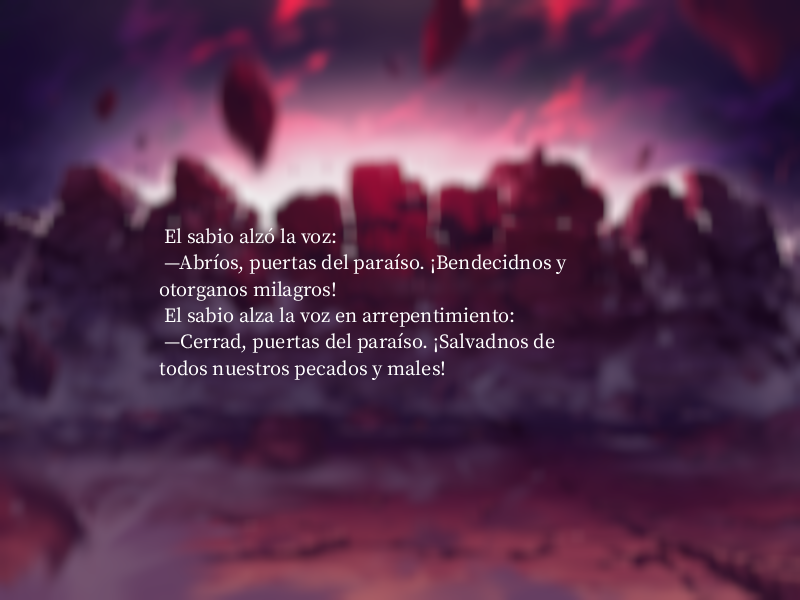
<style>
.page{position:relative;width:800px;height:600px}
.page>*{position:absolute;margin:0}
.t1{font:22px "OfficialFateFont-Medium";color:#ffffff}
</style>
<div class="page">
<p class="t1" style="left:159px;top:227px;width:408px;height:154px">El sabio alzó la voz:<br> —Abríos, puertas del paraíso. ¡Bendecidnos y <br>otorganos milagros!<br> El sabio alza la voz en arrepentimiento:<br> —Cerrad, puertas del paraíso. ¡Salvadnos de<br>todos nuestros pecados y males!</p>
</div>
